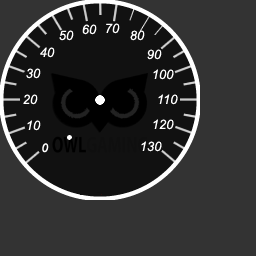
<style>
.page{position:relative;width:256px;height:256px;background:#333333}
.page>*{position:absolute;margin:0}
.t1{font:13px "Arial-ItalicMT";color:#ffffff;text-transform:uppercase}
</style>
<div class="page">
<p class="t1" style="left:59px;top:30px;width:15px;height:11px">50</p>
<p class="t1" style="left:82px;top:24px;width:15px;height:11px">60</p>
<p class="t1" style="left:106px;top:23px;width:14px;height:11px">70</p>
<p class="t1" style="left:130px;top:30px;width:15px;height:11px">80</p>
<p class="t1" style="left:40px;top:47px;width:15px;height:11px">40</p>
<p class="t1" style="left:147px;top:49px;width:15px;height:11px">90</p>
<p class="t1" style="left:26px;top:68px;width:15px;height:11px">30</p>
<p class="t1" style="left:153px;top:69px;width:21px;height:11px">100</p>
<p class="t1" style="left:23px;top:94px;width:15px;height:11px">20</p>
<p class="t1" style="left:158px;top:94px;width:20px;height:11px">110</p>
<p class="t1" style="left:27px;top:120px;width:14px;height:11px">10</p>
<p class="t1" style="left:153px;top:119px;width:21px;height:11px">120</p>
<p class="t1" style="left:141px;top:141px;width:21px;height:11px">130</p>
</div>
